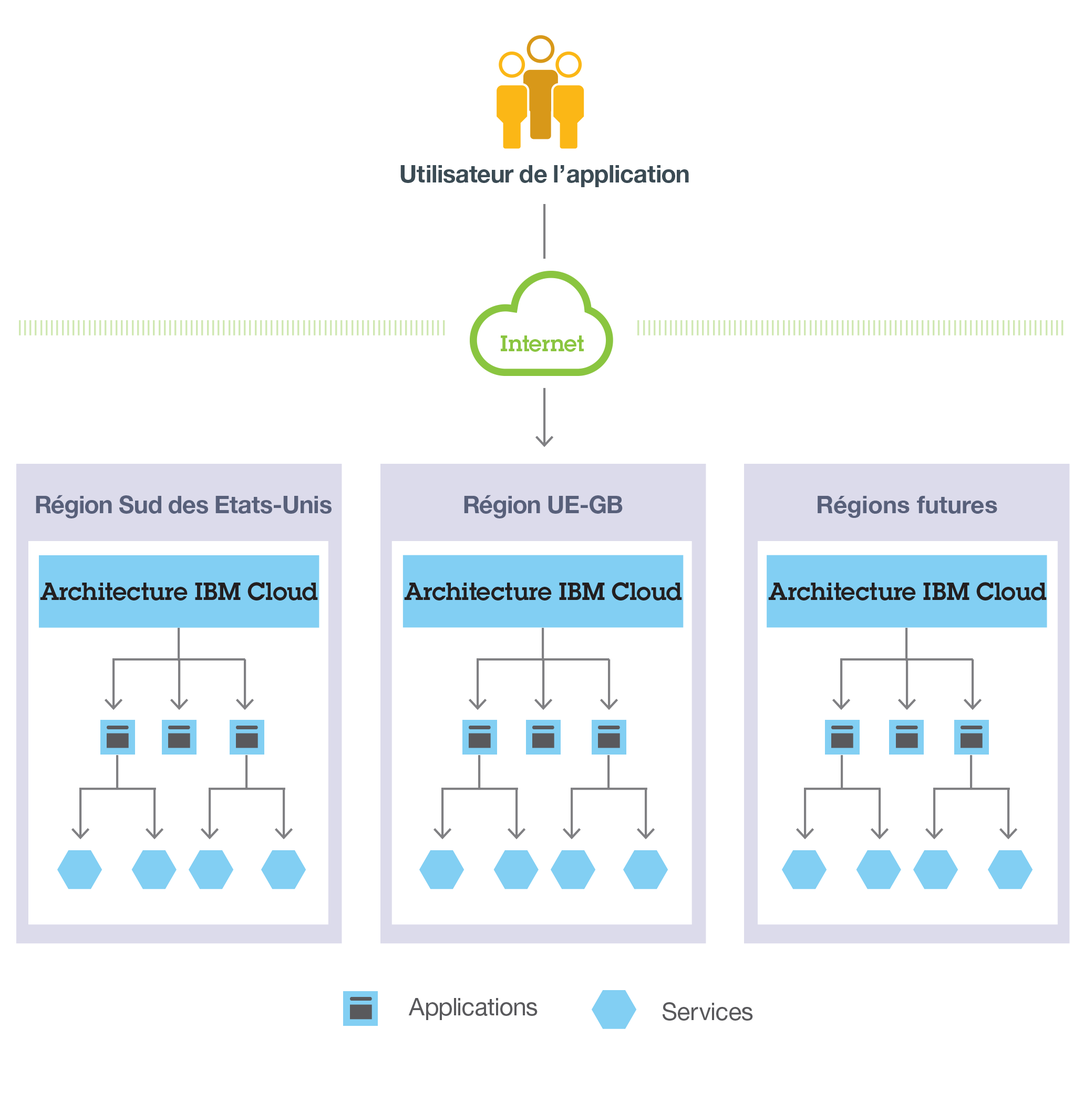
<style>
.page{position:relative;width:1084px;height:1100px;background:#ffffff}
.page>*{position:absolute;margin:0}
.t1{font:24.1px "HelvNeueBoldforIBM";color:#3b4b54}
.t2{font:21.9px "LubalinDemiforIBM";color:#8ac540}
.t3{font:24.1px "HelvNeueBoldforIBM";color:#58607a}
.t4{font:24.1px "HelveticaNeue-Bold";color:#58607a}
.t5{font:24.1px "LubalinDemiforIBM";color:#231f20}
.t6{font:24.1px "HelvNeueRomanforIBM";color:#59595c}
</style>
<div class="page">
<p class="t1" style="left:401px;top:165px;width:288px;height:22px">Utilisateur de l’application</p>
<p class="t2" style="left:501px;top:335px;width:83px;height:17px">Internet</p>
<p class="t3" style="left:36px;top:495px;width:296px;height:23px">Région Sud des Etats-Unis</p>
<p class="t3" style="left:464px;top:495px;width:159px;height:23px">Région UE-GB</p>
<p class="t4" style="left:818px;top:496px;width:180px;height:22px">Régions futures</p>
<p class="t5" style="left:40px;top:582px;width:278px;height:18px">Architecture IBM Cloud</p>
<p class="t5" style="left:404px;top:582px;width:278px;height:18px">Architecture IBM Cloud</p>
<p class="t5" style="left:768px;top:582px;width:279px;height:18px">Architecture IBM Cloud</p>
<p class="t6" style="left:408px;top:998px;width:130px;height:22px">Applications</p>
<p class="t6" style="left:663px;top:1002px;width:90px;height:18px">Services</p>
</div>
